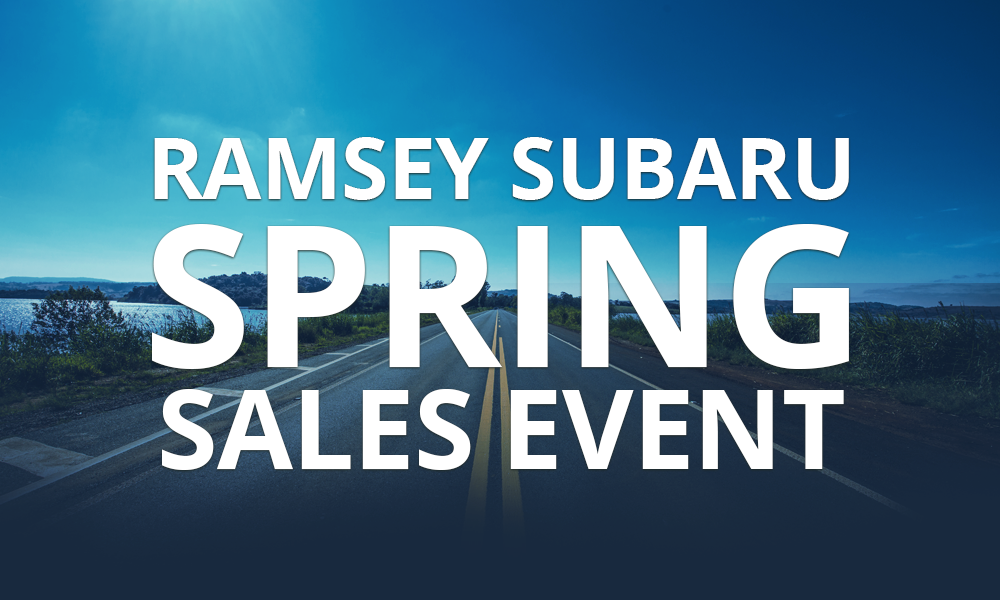
<style>
.page{position:relative;width:1000px;height:600px}
.page>*{position:absolute;margin:0}
.t1{font:147.5px/110px "OpenSans-Bold";letter-spacing:-0.01em;color:#ffffff}
.t2{font:338.5px/232px "OpenSans-Bold";letter-spacing:-0.01em;color:#ffffff}
.t3{font:189.5px/52px "OpenSans-Bold";letter-spacing:-0.01em;color:#ffffff}
</style>
<div class="page">
<p class="t1" style="left:152px;top:137px;width:697px;height:333px;text-align:center">RAMSEY SUBARU<br>        <span class="t2">SPRING<br></span><span class="t3">SALES EVENT</span></p>
</div>
